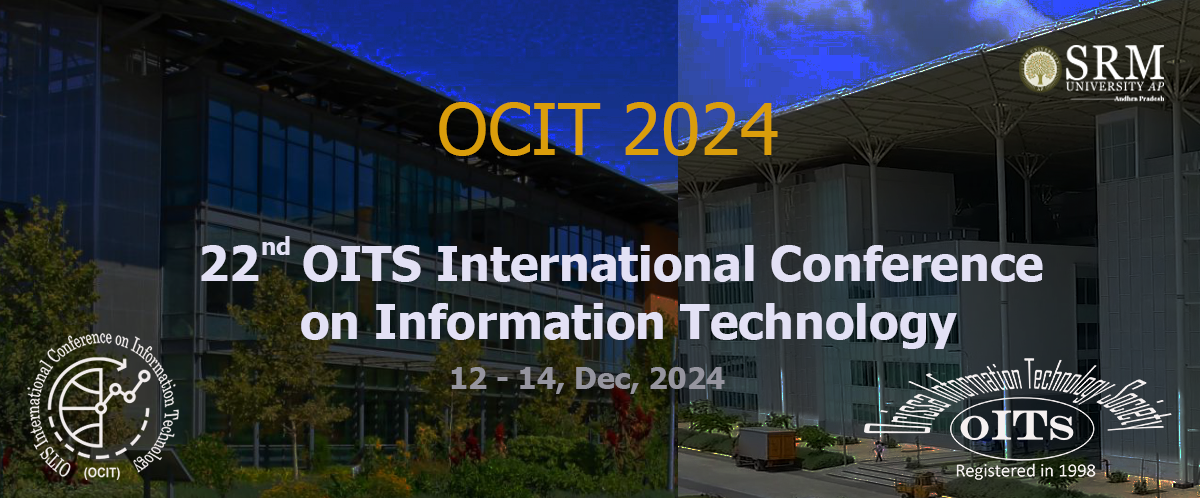
<style>
.page{position:relative;width:1200px;height:498px}
.page>*{position:absolute;margin:0}
.t1{font:72px "Tahoma";color:#da9d0b}
.t2{font:48px "Tahoma-Bold";color:#e3e1f5}
.t3{font:24px "Tahoma-Bold";color:#e3e1f5}
.t4{font:30px "Tahoma-Bold";color:#96959f}
</style>
<div class="page">
<p class="t1" style="left:439px;top:102px;width:339px;height:54px">OCIT 2024</p>
<p class="t2" style="left:201px;top:245px;width:842px;height:104px;text-align:center">22   OITS International Conference <br>on Information Technology</p>
<p class="t3" style="left:262px;top:236px;width:28px;height:19px">nd</p>
<p class="t4" style="left:451px;top:367px;width:274px;height:27px">12 - 14, Dec, 2024</p>
</div>
